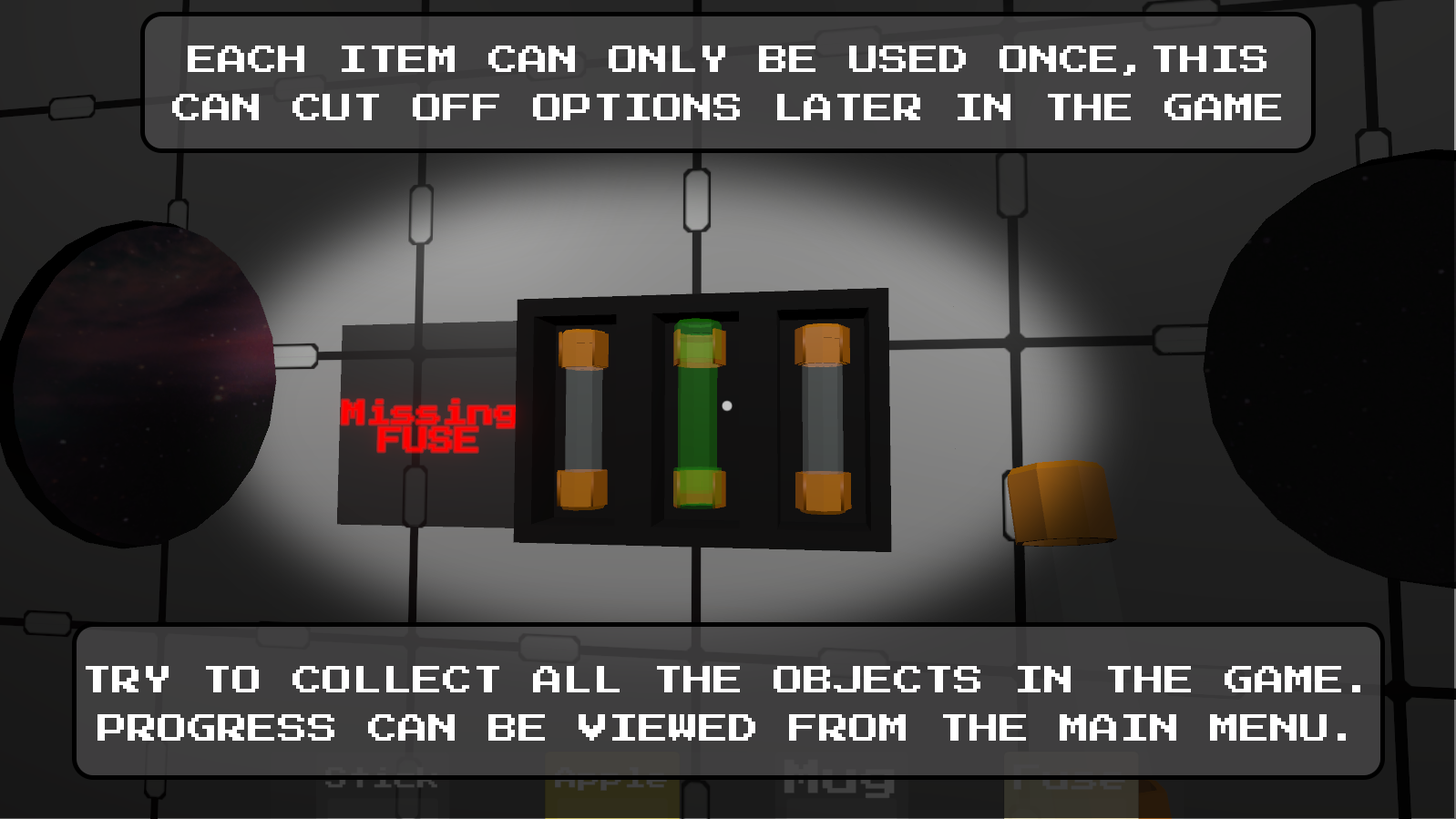
<style>
.page{position:relative;width:1456px;height:819px}
.page>*{position:absolute;margin:0}
.t1{font:30.4px/48.6px "PressStart2P-Regular";color:#ffffff;text-transform:uppercase}
</style>
<div class="page">
<p class="t1" style="left:172px;top:46px;width:1109px;height:74px;text-align:center">Each item can only be used once,this<br>can cut off options later in the game</p>
<p class="t1" style="left:86px;top:666px;width:1274px;height:75px;text-align:center">Try to collect all the objects in the game.<br>Progress can be viewed from the main menu.</p>
</div>
